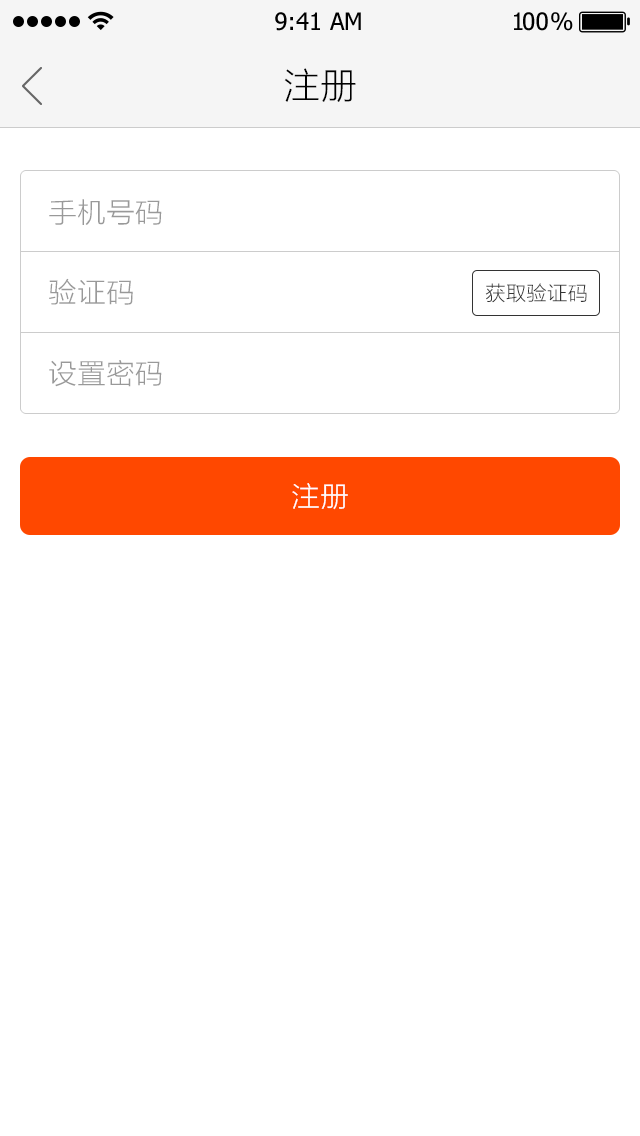
<style>
.page{position:relative;width:640px;height:1136px;background:#ffffff}
.page>*{position:absolute;margin:0}
.t1{font:24px "Tahoma";color:#000000}
.t2{font:24px "Tahoma";letter-spacing:-0.1em;color:#000000}
.t3{font:24px "Tahoma";letter-spacing:-0.25em;color:#000000}
.t4{font:36px "STHeitiSC-Light";color:#000000}
.t5{font:28px "STHeitiSC-Light";color:#999999}
.t6{font:20px "STHeitiSC-Light";color:#333333}
.t7{font:28px "STHeitiSC-Light";color:#ffffff}
</style>
<div class="page">
<p class="t1" style="left:275px;top:12px;width:86px;height:19px">9:41 AM</p>
<p class="t2" style="left:514px;top:12px;width:59px;height:19px">1<span class="t1">0</span><span class="t3">0 </span>%</p>
<p class="t4" style="left:284px;top:68px;width:72px;height:34px">注册</p>
<p class="t5" style="left:49px;top:199px;width:113px;height:26px">手机号码</p>
<p class="t5" style="left:49px;top:278px;width:84px;height:27px">验证码</p>
<p class="t6" style="left:485px;top:283px;width:102px;height:20px">获取验证码</p>
<p class="t5" style="left:49px;top:360px;width:113px;height:27px">设置密码</p>
<p class="t7" style="left:292px;top:483px;width:56px;height:27px">注册</p>
</div>
